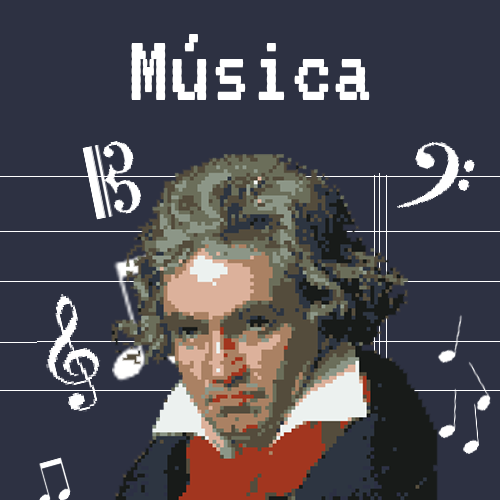
<style>
.page{position:relative;width:500px;height:500px;background:#2d3142}
.page>*{position:absolute;margin:0}
.t1{font:102px "VT323-Regular";color:#ffffff}
</style>
<div class="page">
<p class="t1" style="left:131px;top:34px;width:239px;height:66px">Música</p>
</div>
